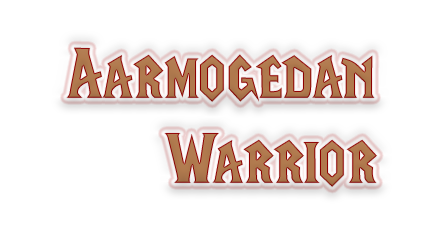
<style>
.page{position:relative;width:444px;height:227px;background:#ffffff}
.page>*{position:absolute;margin:0}
.t1{font:70.9px "LifeCraft";color:#b17a4e}
</style>
<div class="page">
<p class="t1" style="left:66px;top:47px;width:311px;height:140px;text-align:center">Aarmogedan <br>   Warrior</p>
</div>
